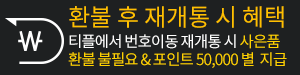
<style>
.page{position:relative;width:300px;height:75px;background:#1e2021}
.page>*{position:absolute;margin:0}
.t1{font:24.1px "NotoSansCJKkr-Regular";letter-spacing:-0.01em;color:#ffc000}
.t2{font:15.4px "NotoSansCJKkr-Regular";letter-spacing:-0.05em;color:#ffd200}
.t3{font:15.4px "NotoSansCJKkr-Regular";letter-spacing:-0.05em;color:#ffffff}
</style>
<div class="page">
<p class="t1" style="left:69px;top:6px;width:215px;height:22px">환불 후 재개통 시 혜택</p>
<p class="t2" style="left:68px;top:34px;width:219px;height:34px"><span class="t3">티플에서 번호이동 재개통 시 </span>사은품 <br>환불 불필요 &amp; 포인트 50,000 별  지급</p>
</div>
